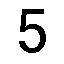
<style>
.page{position:relative;width:64px;height:64px;background:#ffffff}
.page>*{position:absolute;margin:0}
.t1{font:60px "MicrosoftSansSerif";color:#000000}
</style>
<div class="page">
<p class="t1" style="left:19px;top:9px;width:27px;height:44px">5</p>
</div>
